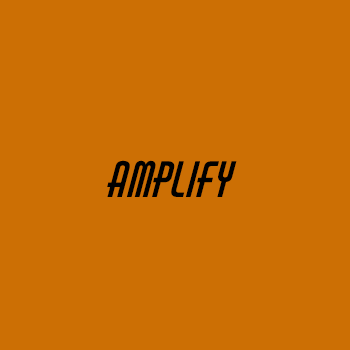
<style>
.page{position:relative;width:350px;height:350px;background:#cc6f04}
.page>*{position:absolute;margin:0}
.t1{font:47.7px "AirAmerica-Regular";color:#000000}
</style>
<div class="page">
<p class="t1" style="left:107px;top:160px;width:130px;height:37px">Amplify</p>
</div>
